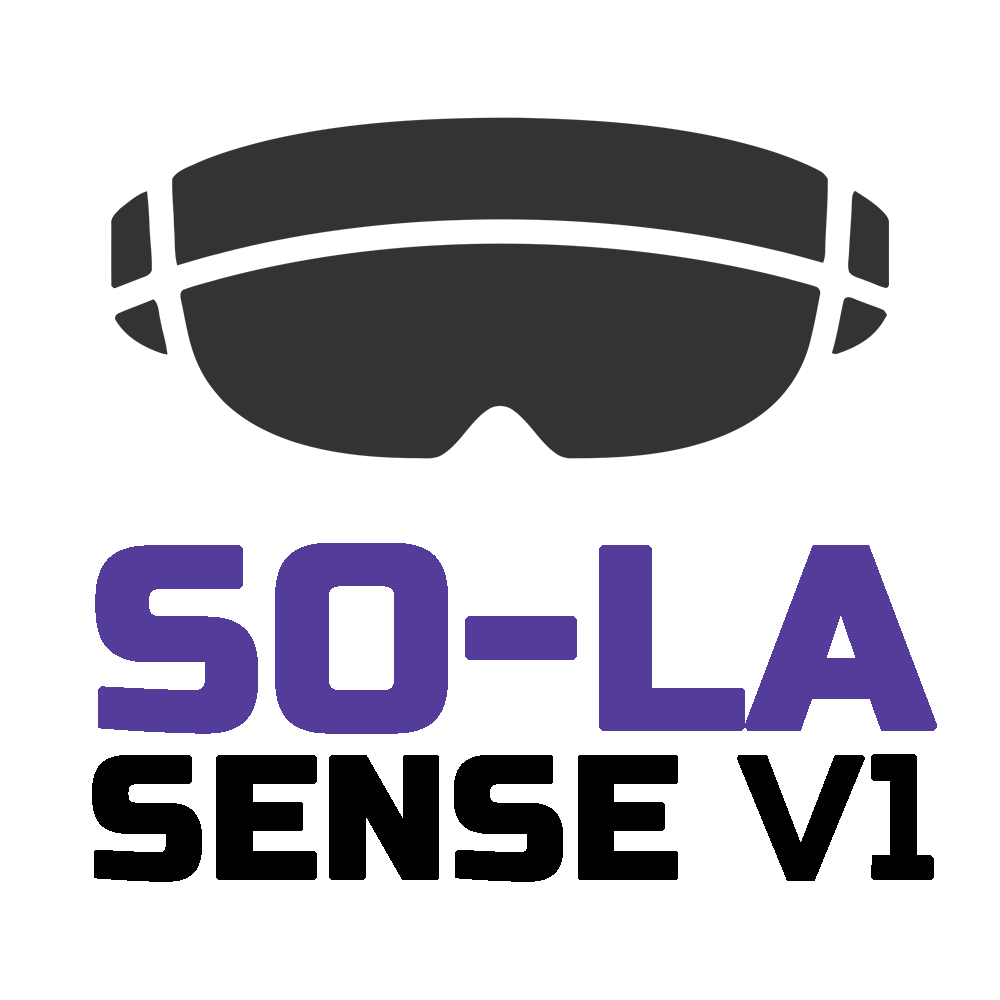
<style>
.page{position:relative;width:1000px;height:1000px;background:#ffffff}
.page>*{position:absolute;margin:0}
.t1{font:254.2px/37.5px "RussoOne-Regular";color:#543c9b;font-weight:bold}
.t2{font:170.8px/37.5px "RussoOne-Regular";color:#000000;font-weight:bold}
.t3{font:170.8px/37.5px "NexaBold";color:#000000;font-weight:bold}
</style>
<div class="page">
<p class="t1" style="left:92px;top:543px;width:845px;height:339px;text-align:center">SO-LA<br><span class="t2"><br><br><br>SENSE </span><span class="t3">V1</span></p>
</div>
